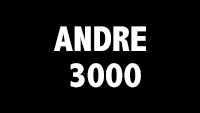
<style>
.page{position:relative;width:200px;height:113px;background:#000000}
.page>*{position:absolute;margin:0}
.t1{font:36px/36px "AbadiMT-CondensedExtraBold";color:#ffffff}
</style>
<div class="page">
<p class="t1" style="left:54px;top:26px;width:92px;height:62px;text-align:center">ANDRE <br>3000</p>
</div>
